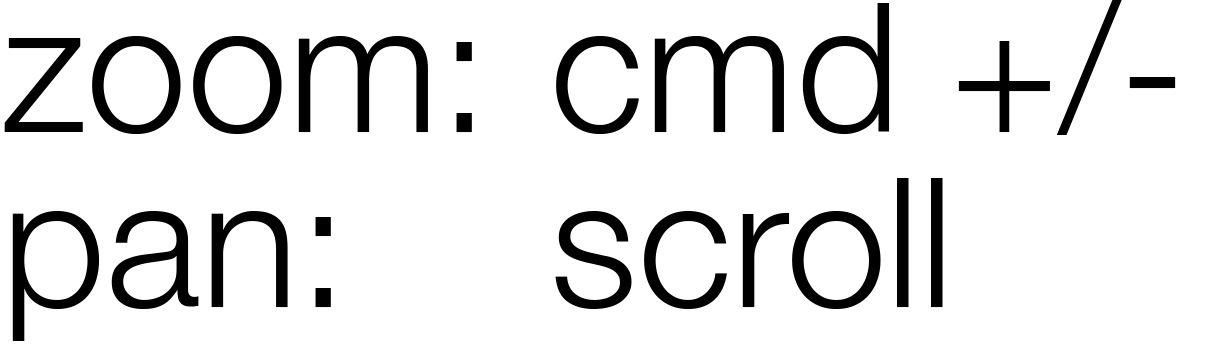
<style>
.page{position:relative;width:1220px;height:362px;background:#ffffff}
.page>*{position:absolute;margin:0}
.t1{font:181.4px/175px "HelveticaNeue-Light";color:#000000}
</style>
<div class="page">
<p class="t1" style="left:4px;top:0px;width:1172px;height:341px">zoom:  cmd +/-<br>pan:      scroll</p>
</div>
